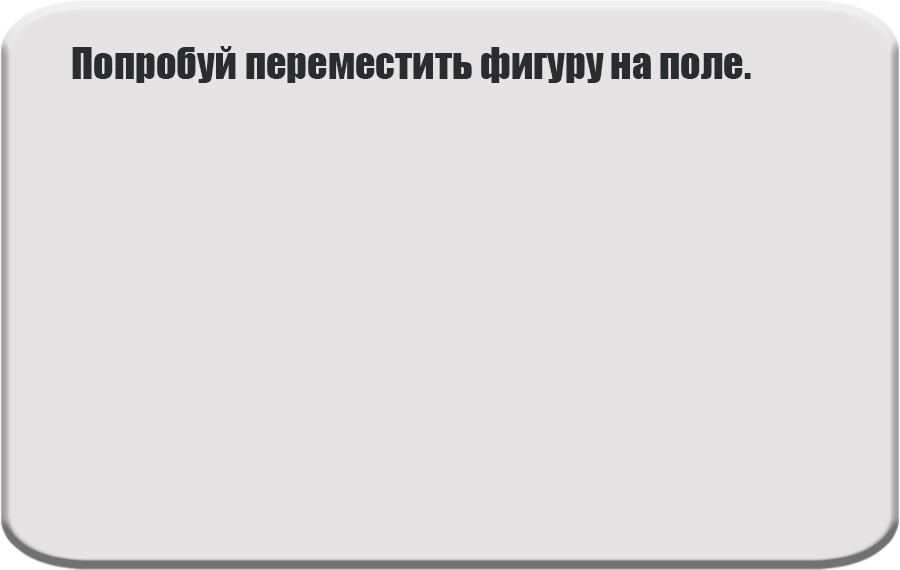
<style>
.page{position:relative;width:900px;height:570px;background:#e5e3e3}
.page>*{position:absolute;margin:0}
.t1{font:40px "Impact";color:#2a2c30}
</style>
<div class="page">
<p class="t1" style="left:72px;top:46px;width:679px;height:37px">Попробуй переместить фигуру на поле.</p>
</div>
